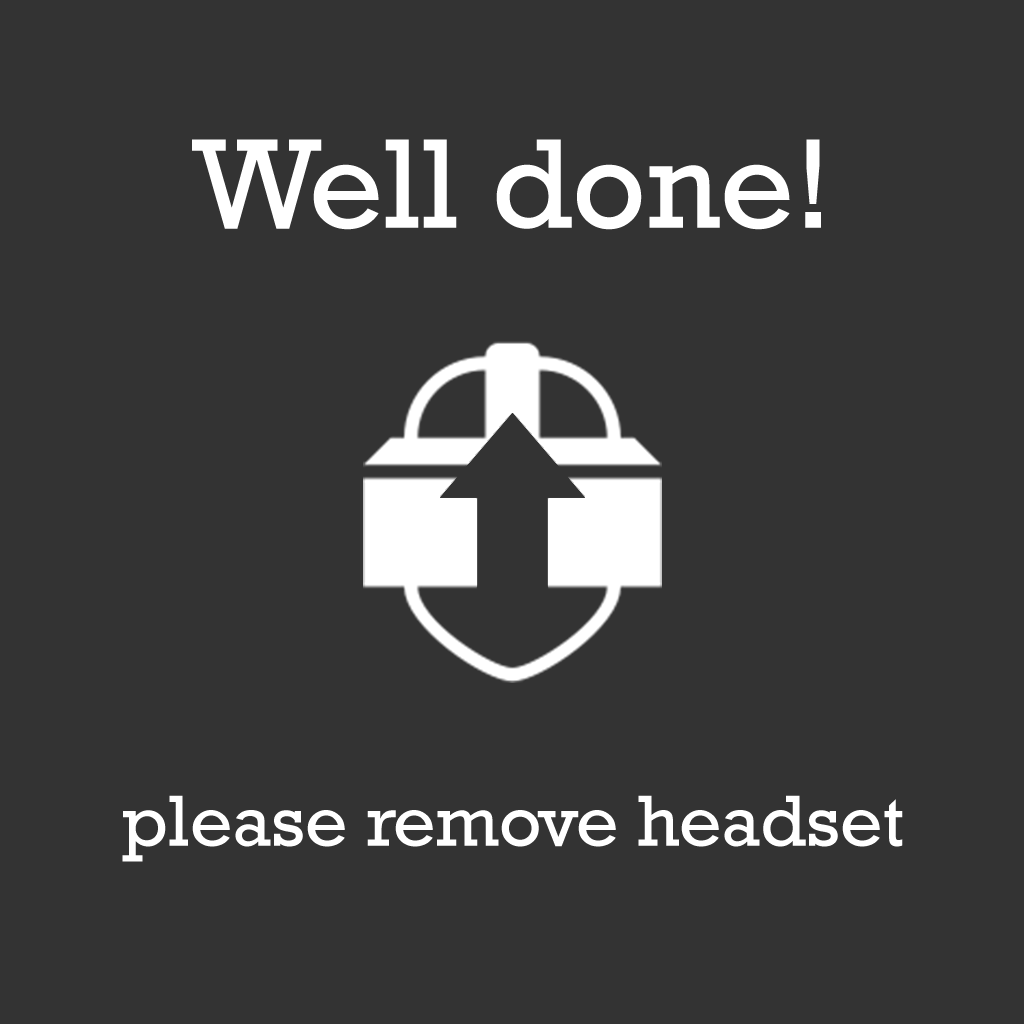
<style>
.page{position:relative;width:1024px;height:1024px;background:#333333}
.page>*{position:absolute;margin:0}
.t1{font:129.4px "Rockwell";color:#ffffff}
.t2{font:73.7px "Rockwell";color:#ffffff}
</style>
<div class="page">
<p class="t1" style="left:192px;top:139px;width:629px;height:91px">Well done!</p>
<p class="t2" style="left:122px;top:795px;width:781px;height:67px">please remove headset</p>
</div>
